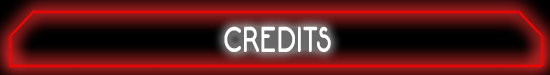
<style>
.page{position:relative;width:550px;height:75px}
.page>*{position:absolute;margin:0}
.t1{font:36px "Neon80s";color:#ffffff;scale:0.79 1}
</style>
<div class="page">
<p class="t1" style="left:224px;top:26px;width:107px;height:26px">CREDITS</p>
</div>
